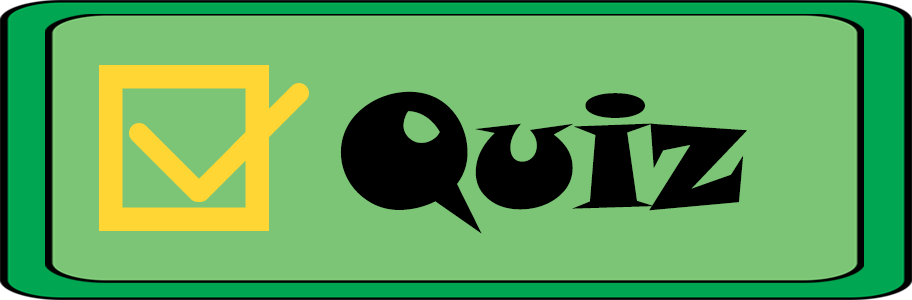
<style>
.page{position:relative;width:912px;height:300px;background:#7cc576}
.page>*{position:absolute;margin:0}
.t1{font:160px "SnapITC-Regular";color:#000000}
</style>
<div class="page">
<p class="t1" style="left:340px;top:91px;width:407px;height:143px">Quiz</p>
</div>
